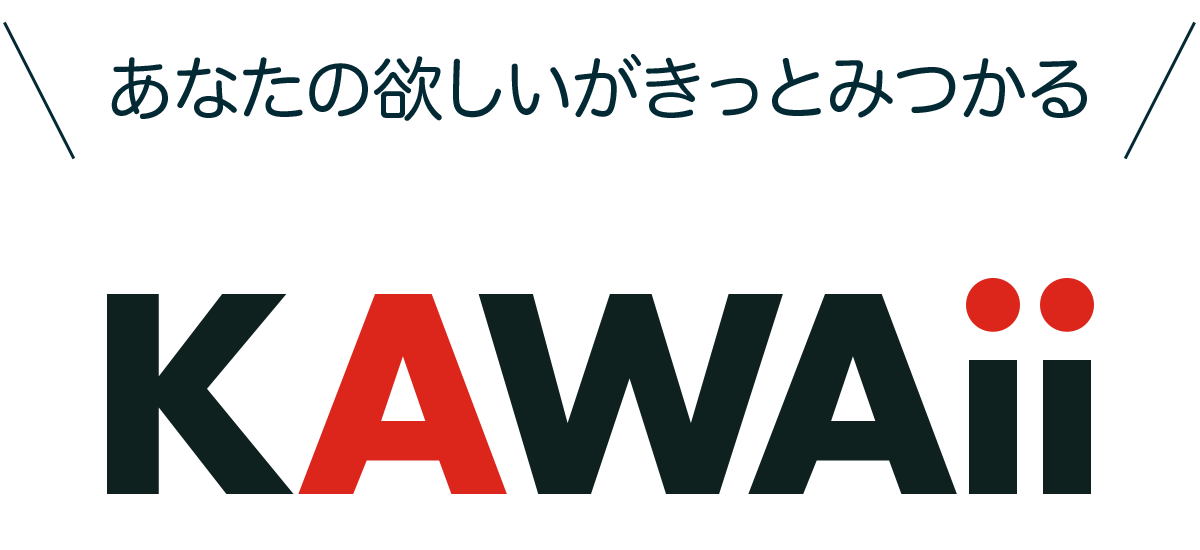
<style>
.page{position:relative;width:1200px;height:550px;background:#ffffff}
.page>*{position:absolute;margin:0}
.t1{font:69.9px "HiraMaruPro-W4";color:#032a34}
.t2{font:299.1px "FuturaPT-Bold";color:#0e211f}
.t3{font:299.1px "FuturaPT-Bold";color:#dc251b}
</style>
<div class="page">
<p class="t1" style="left:111px;top:54px;width:976px;height:67px">あなたの欲しいがきっとみつかる</p>
<p class="t2" style="left:107px;top:278px;width:987px;height:216px">K<span class="t3">A</span>WAii</p>
</div>
